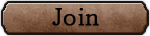
<style>
.page{position:relative;width:150px;height:36px}
.page>*{position:absolute;margin:0}
.t1{font:24px "Batang";color:#000000;font-weight:bold}
</style>
<div class="page">
<p class="t1" style="left:52px;top:8px;width:47px;height:18px">Join</p>
</div>
